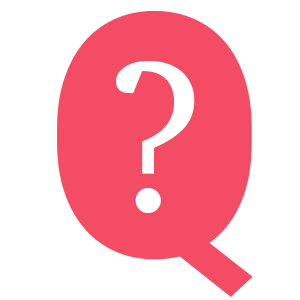
<style>
.page{position:relative;width:300px;height:300px;background:#ffffff}
.page>*{position:absolute;margin:0}
.t1{font:340px "Roboto-Regular";color:#f34c64}
.t2{font:220px "Charter";color:#ffffff}
</style>
<div class="page">
<p class="t1" style="left:57px;top:10px;width:196px;height:287px">Q</p>
<p class="t2" style="left:116px;top:61px;width:79px;height:152px">?</p>
</div>
